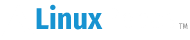
<style>
.page{position:relative;width:190px;height:40px;background:#ffffff}
.page>*{position:absolute;margin:0}
.t1{font:30px "FiraSansCondensed-Bold";color:#1793d1}
.t2{font:8px "FiraSansCondensed-Book";color:#808080}
</style>
<div class="page">
<p class="t1" style="left:36px;top:4px;width:67px;height:26px">Linux</p>
<p class="t2" style="left:179px;top:23px;width:9px;height:6px">TM</p>
</div>
